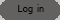
<style>
.page{position:relative;width:60px;height:20px;background:#626160}
.page>*{position:absolute;margin:0}
.t1{font:10px "Shruti";color:#000000}
</style>
<div class="page">
<p class="t1" style="left:18px;top:4px;width:26px;height:10px">Log in</p>
</div>
